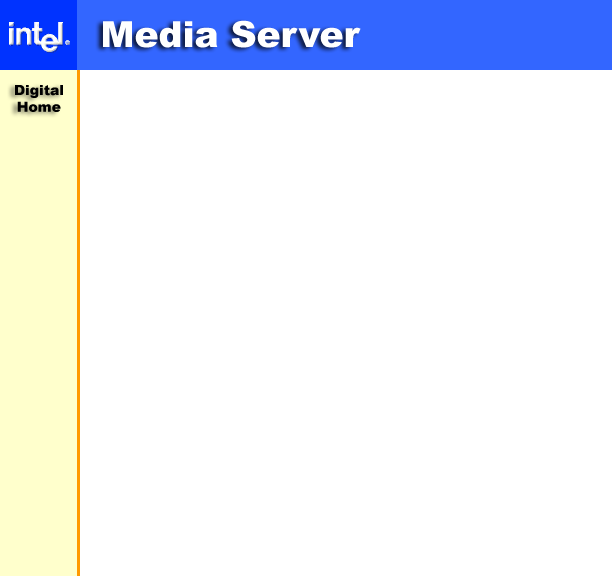
<style>
.page{position:relative;width:612px;height:576px;background:#ffffff}
.page>*{position:absolute;margin:0}
.t1{font:36px "Arial-Black";color:#ffffff}
.t2{font:14px "Arial-Black";color:#000000}
</style>
<div class="page">
<p class="t1" style="left:103px;top:20px;width:258px;height:28px">Media Server</p>
<p class="t2" style="left:15px;top:85px;width:48px;height:27px;text-align:center">Digital<br>Home</p>
</div>
